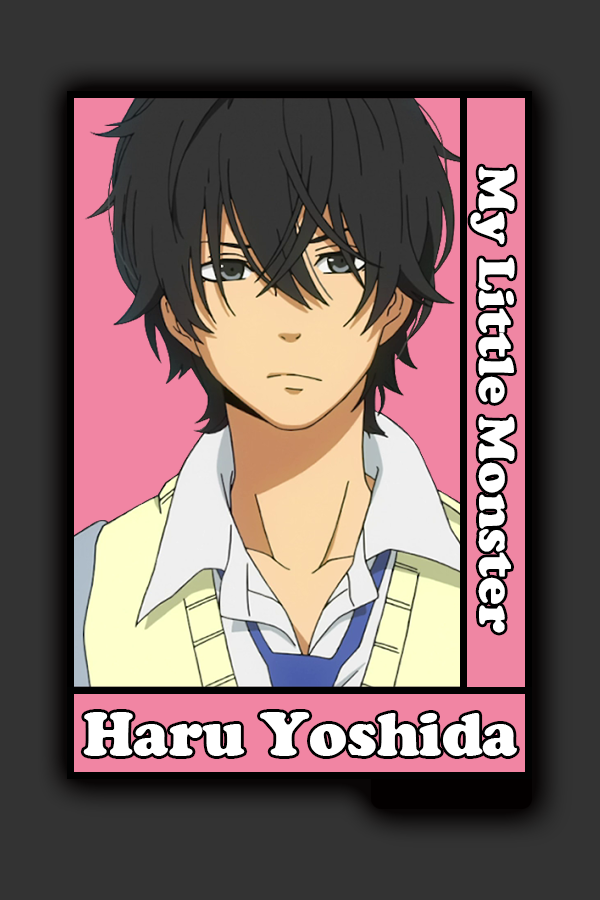
<style>
.page{position:relative;width:600px;height:900px;background:#333333}
.page>*{position:absolute;margin:0}
.t1{font:52px "CooperBlack";color:#ffffff}
.t2{font:62.6px "CooperBlack";color:#ffffff}
</style>
<div class="page">
<p class="t1" style="left:470px;top:166px;width:45px;height:467px;rotate:90deg">My Little Monster</p>
<p class="t2" style="left:83px;top:712px;width:434px;height:44px">Haru Yoshida</p>
</div>
